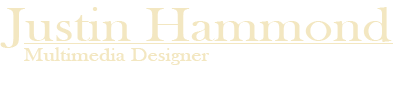
<style>
.page{position:relative;width:400px;height:91px;background:#ffffff}
.page>*{position:absolute;margin:0}
.t1{font:49.4px "BaskOldFace";color:#f3e7c1;scale:1.13 1}
.t2{font:19.5px "BaskOldFace";color:#f3e7c1;scale:1.13 1}
</style>
<div class="page">
<p class="t1" style="left:0px;top:7px;width:392px;height:41px">Justin Hammond</p>
<p class="t2" style="left:24px;top:47px;width:185px;height:18px">Multimedia Designer</p>
</div>
